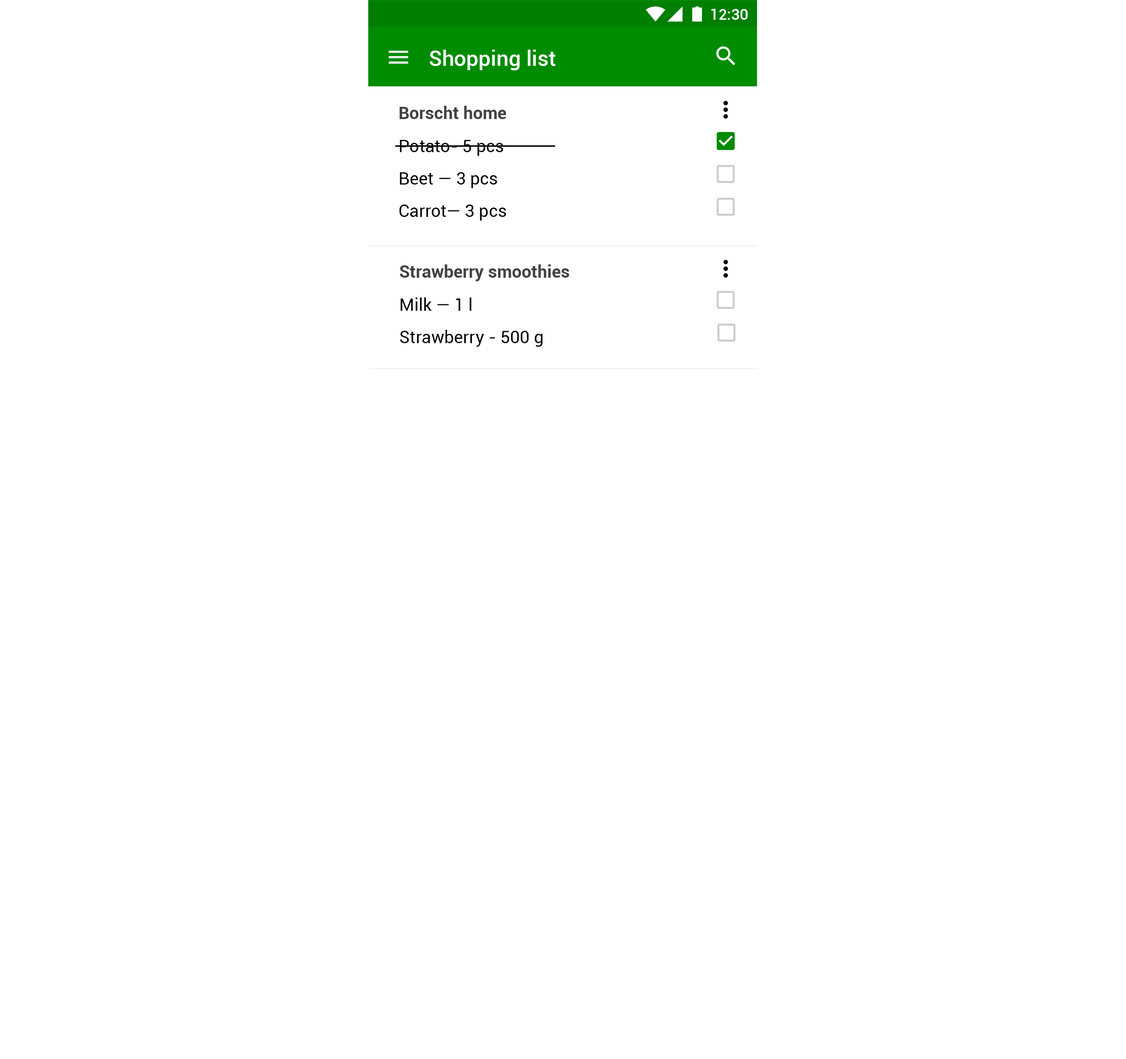
<style>
.page{position:relative;width:1126px;height:1059px;background:#ffffff}
.page>*{position:absolute;margin:0}
.t1{font:15.1px "Roboto-Medium";color:#ffffff}
.t2{font:21.6px "Roboto-Medium";color:#ffffff}
.t3{font:17.3px "Roboto-Bold";color:#424242}
.t4{font:17.3px/32.4px "Roboto-Regular";color:#000000}
</style>
<div class="page">
<p class="t1" style="left:711px;top:9px;width:36px;height:11px">12:30</p>
<p class="t2" style="left:430px;top:50px;width:125px;height:21px">Shopping list</p>
<p class="t3" style="left:399px;top:106px;width:107px;height:13px">Borscht home</p>
<p class="t4" style="left:399px;top:140px;width:107px;height:81px">Potato- 5 pcs<br>Beet — 3 pcs<br>Carrot— 3 pcs</p>
<p class="t3" style="left:400px;top:264px;width:169px;height:17px">Strawberry smoothies</p>
<p class="t4" style="left:400px;top:298px;width:142px;height:49px">Milk — 1 l<br>Strawberry - 500 g</p>
</div>
